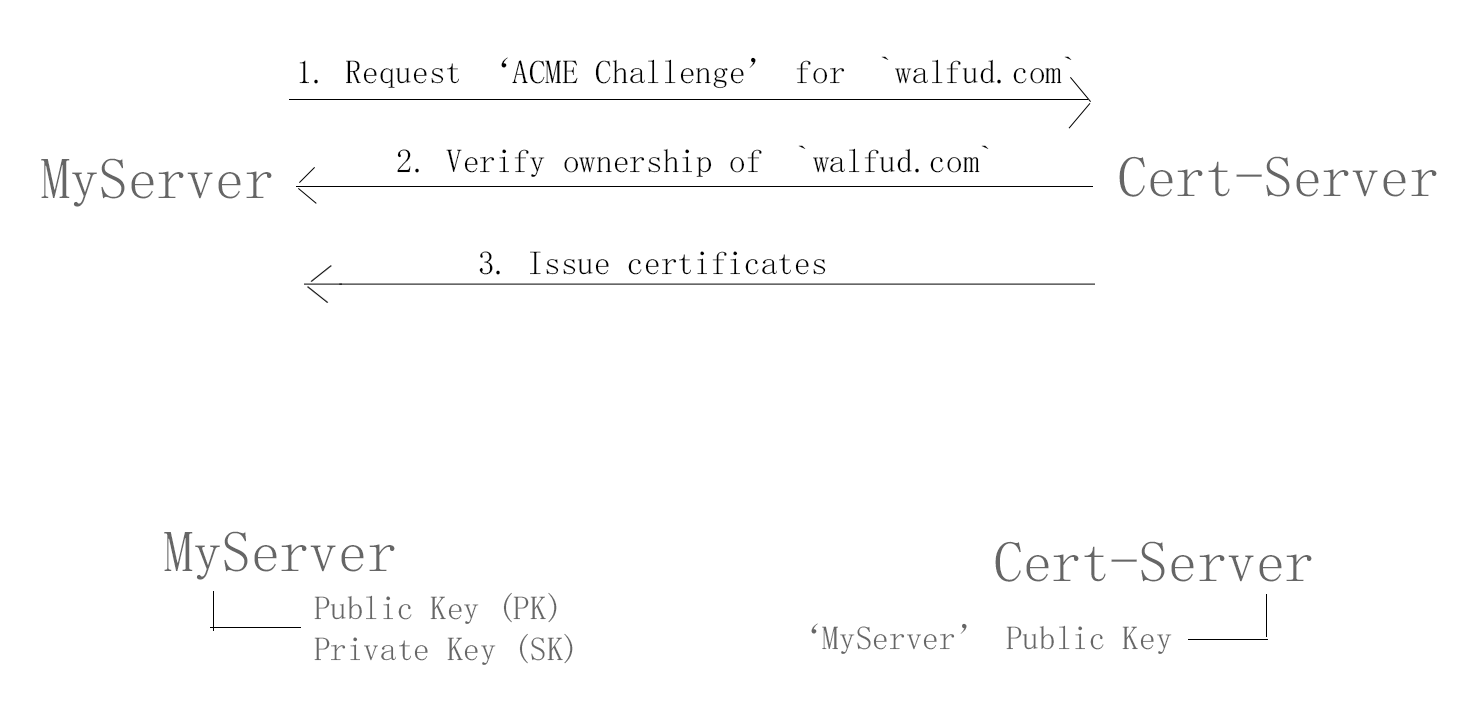
<style>
.page{position:relative;width:1476px;height:708px;background:#ffffff}
.page>*{position:absolute;margin:0}
.t1{font:33.3px "FangSong";color:#000000}
.t2{font:58.3px "FangSong";color:#666666}
.t3{font:33.3px/41.7px "FangSong";color:#666666}
.t4{font:33.3px "FangSong";color:#666666}
</style>
<div class="page">
<p class="t1" style="left:299px;top:56px;width:773px;height:33px">1. Request ‘ACME Challenge’ for  `walfud.com`</p>
<p class="t1" style="left:397px;top:145px;width:592px;height:32px">2. Verify ownership of  `walfud.com`</p>
<p class="t2" style="left:41px;top:158px;width:231px;height:49px">MyServer</p>
<p class="t2" style="left:1119px;top:156px;width:318px;height:41px">Cert-Server</p>
<p class="t1" style="left:479px;top:251px;width:347px;height:24px">3. Issue certificates</p>
<p class="t2" style="left:164px;top:531px;width:231px;height:49px">MyServer</p>
<p class="t2" style="left:995px;top:541px;width:317px;height:41px">Cert-Server</p>
<p class="t3" style="left:314px;top:592px;width:259px;height:73px">Public Key (PK)<br>Private Key (SK)</p>
<p class="t4" style="left:811px;top:623px;width:361px;height:31px">‘MyServer’ Public Key</p>
</div>
